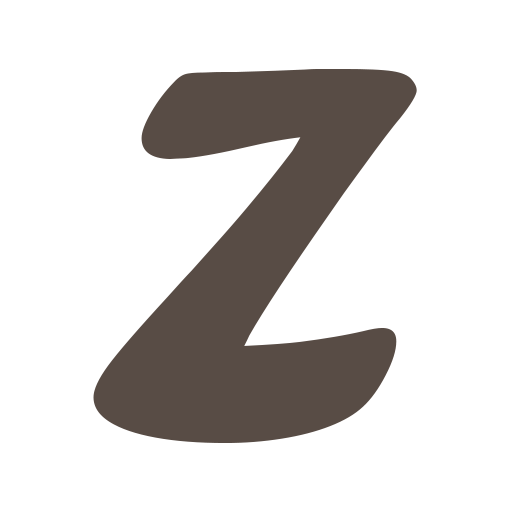
<style>
.page{position:relative;width:512px;height:512px;background:#ffffff}
.page>*{position:absolute;margin:0}
.t1{font:555.6px "ForteMT";color:#584c45}
</style>
<div class="page">
<p class="t1" style="left:93px;top:69px;width:324px;height:374px">Z</p>
</div>
